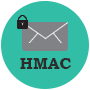
<style>
.page{position:relative;width:90px;height:90px;background:#31bda6}
.page>*{position:absolute;margin:0}
.t1{font:16px "BookmanOldStyle-Bold";color:#2d2e2c}
</style>
<div class="page">
<p class="t1" style="left:20px;top:58px;width:51px;height:11px">HMAC</p>
</div>
